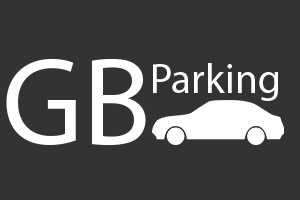
<style>
.page{position:relative;width:300px;height:200px;background:#333333}
.page>*{position:absolute;margin:0}
.t1{font:125px "MyriadPro-Regular";color:#ffffff}
.t2{font:41.7px "MyriadPro-Regular";color:#ffffff}
</style>
<div class="page">
<p class="t1" style="left:6px;top:58px;width:140px;height:88px">GB</p>
<p class="t2" style="left:153px;top:63px;width:126px;height:38px">Parking</p>
</div>
